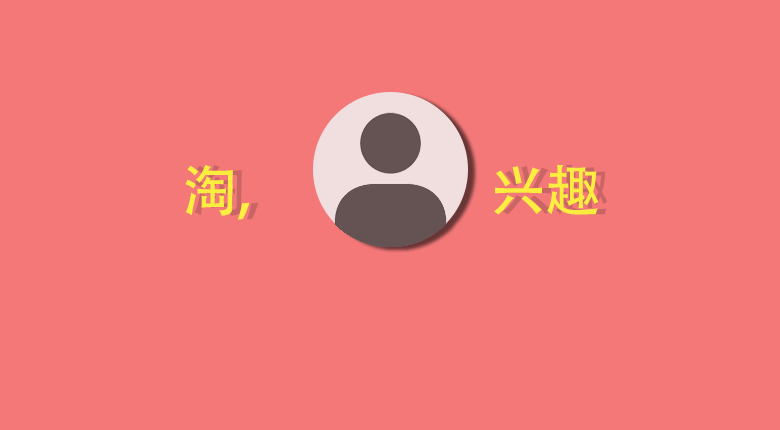
<style>
.page{position:relative;width:780px;height:430px;background:#f47878}
.page>*{position:absolute;margin:0}
.t1{font:56px "AdobeHeitiStd-Regular";letter-spacing:-0.02em;color:#ffff33}
.t2{font:56px "AdobeHeitiStd-Regular";letter-spacing:-0.02em;color:#1e2220}
</style>
<div class="page">
<p class="t1" style="left:185px;top:164px;width:414px;height:56px;opacity:0.85"><span class="t2">      </span>淘,                     兴趣</p>
</div>
